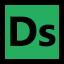
<style>
.page{position:relative;width:64px;height:64px;background:#25ae60}
.page>*{position:absolute;margin:0}
.t1{font:42px "SegoeUI-Bold";color:#000000}
</style>
<div class="page">
<p class="t1" style="left:10px;top:16px;width:46px;height:31px">Ds</p>
</div>
